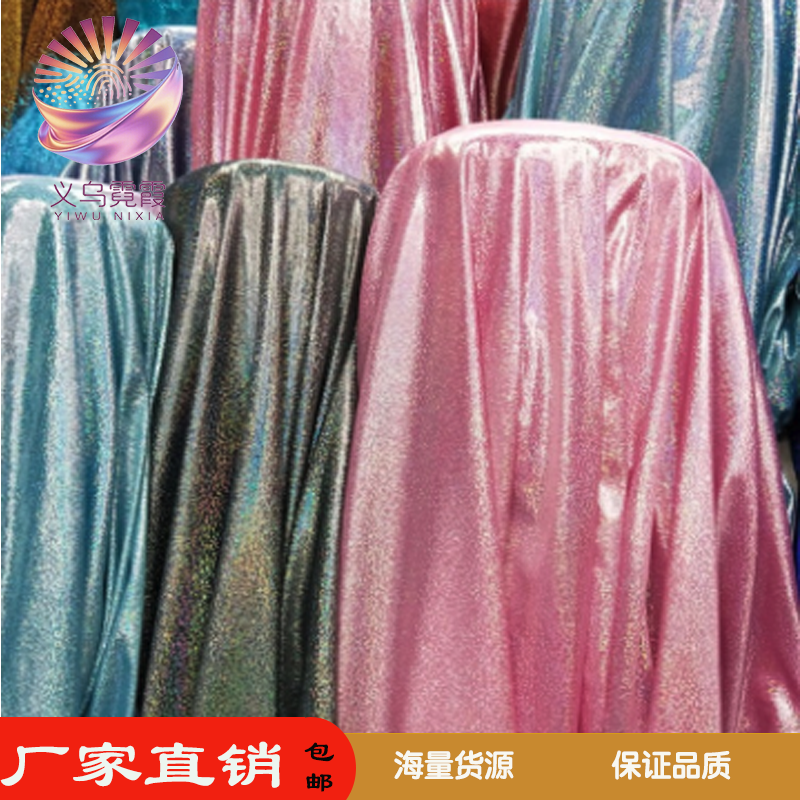
<style>
.page{position:relative;width:800px;height:800px}
.page>*{position:absolute;margin:0}
.t1{font:72px "STBaoliSC-Regular";color:#edf6f0}
.t2{font:30px/30px "STBaoliSC-Regular";color:#070707}
.t3{font:30px "STYuanti-SC-Bold";color:#f8f8f2}
.t4{font:30px "STBaoliSC-Regular";color:#070707}
</style>
<div class="page">
<p class="t1" style="left:0px;top:741px;width:281px;height:47px">厂家直销</p>
<p class="t2" style="left:304px;top:742px;width:30px;height:50px;text-align:center">包<br>   邮</p>
<p class="t3" style="left:394px;top:750px;width:337px;height:30px"><span class="t4">                                  </span>海量货源             保证品质</p>
</div>
